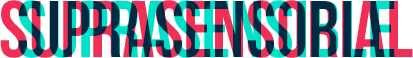
<style>
.page{position:relative;width:413px;height:58px;background:#002944}
.page>*{position:absolute;margin:0}
.t1{font:80px "BebasNeueBold";letter-spacing:-0.005em}
</style>
<div class="page">
<p class="t1" style="left:0px;top:0px;width:413px;height:58px">suprasensorial</p>
<p class="t1" style="left:18px;top:0px;width:377px;height:58px">suprasensible</p>
</div>
